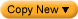
<style>
.page{position:relative;width:78px;height:19px}
.page>*{position:absolute;margin:0}
.t1{font:11px "ArialMT";color:#000000}
</style>
<div class="page">
<p class="t1" style="left:7px;top:5px;width:52px;height:11px">Copy New</p>
</div>
